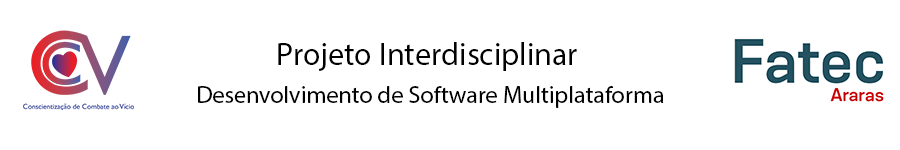
<style>
.page{position:relative;width:900px;height:150px;background:#ffffff}
.page>*{position:absolute;margin:0}
.t1{font:24px "MyriadPro-Regular";color:#000000}
.t2{font:32px "MyriadPro-Regular";color:#000000}
</style>
<div class="page">
<p class="t1" style="left:198px;top:42px;width:466px;height:66px;text-align:center"><span class="t2">Projeto Interdisciplinar<br> </span>Desenvolvimento de Software Multiplataforma</p>
</div>
